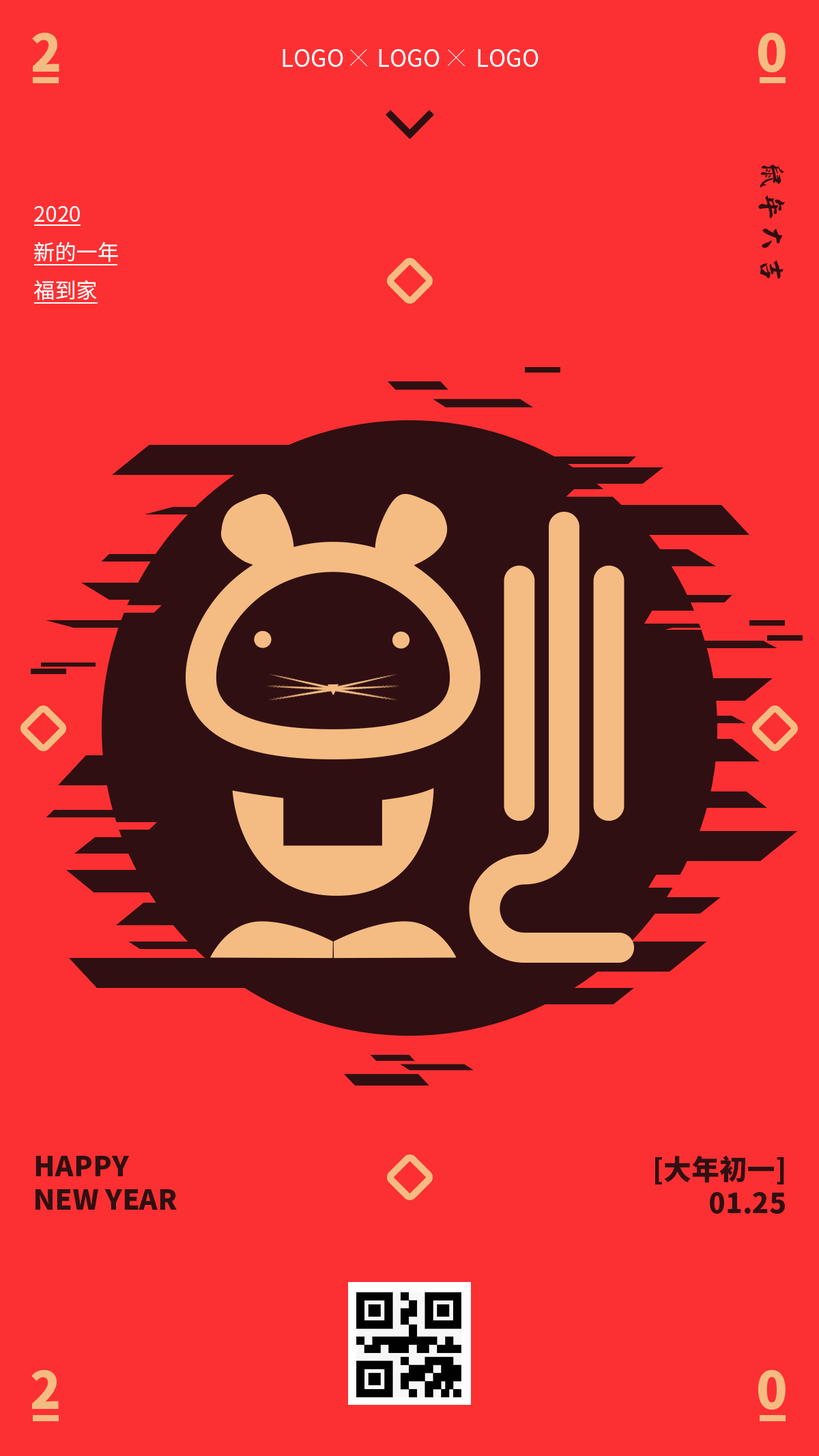
<style>
.page{position:relative;width:819px;height:1456px;background:#fc3033}
.page>*{position:absolute;margin:0}
.t1{font:51.3px "SourceHanSansCN-Heavy";color:#f4bc82;text-transform:uppercase}
.t2{font:23.3px "SourceHanSansCN-Regular";color:#ffffff}
.t3{font:31.7px "zihun96hao-huxiaoshoushu";color:#2f0f11}
.t4{font:21.3px/38.4px "SourceHanSansCN-Regular";color:#ffffff}
.t5{font:27.9px "SourceHanSansCN-Heavy";color:#2f0f11}
</style>
<div class="page">
<p class="t1" style="left:32px;top:33px;width:27px;height:39px">2</p>
<p class="t1" style="left:758px;top:33px;width:27px;height:39px">0</p>
<p class="t2" style="left:283px;top:49px;width:60px;height:18px">LOGO</p>
<p class="t2" style="left:379px;top:49px;width:60px;height:18px">LOGO</p>
<p class="t2" style="left:478px;top:49px;width:60px;height:18px">LOGO</p>
<p class="t3" style="left:758px;top:164px;width:27px;height:115px;rotate:90deg">鼠年大吉</p>
<p class="t4" style="left:33px;top:206px;width:85px;height:94px">2020<br>新的一年<br>福到家</p>
<p class="t5" style="left:35px;top:1156px;width:142px;height:54px">HAPPY<br>NEW YEAR</p>
<p class="t5" style="left:655px;top:1155px;width:130px;height:59px;text-align:right">[大年初一]<br>01.25</p>
<p class="t1" style="left:31px;top:1370px;width:28px;height:39px">2</p>
<p class="t1" style="left:758px;top:1370px;width:27px;height:40px">0</p>
</div>
